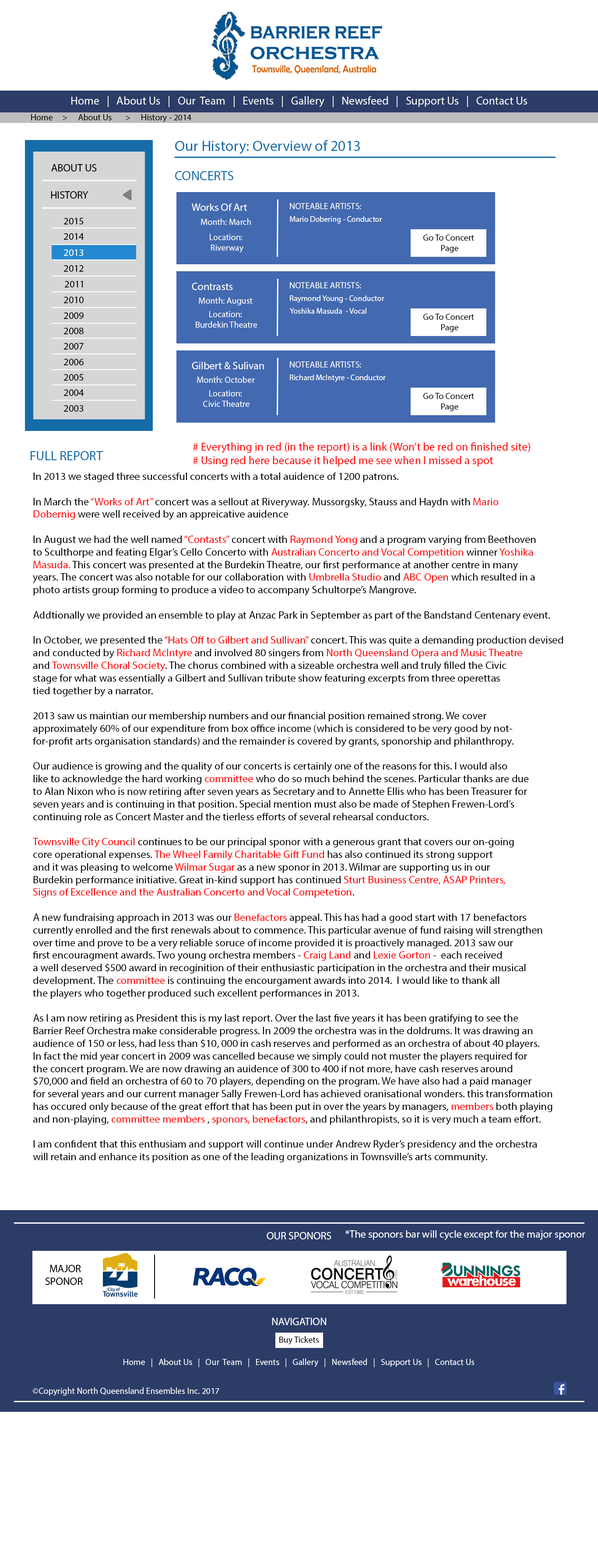
<style>
.page{position:relative;width:598px;height:1568px;background:#ffffff}
.page>*{position:absolute;margin:0}
.t1{font:8.8px "MyriadPro-Regular";color:#000000}
.t2{font:14.9px "MyriadPro-Regular";color:#156ca9}
.t3{font:10.5px "MyriadPro-Regular";color:#000000}
.t4{font:13.1px "MyriadPro-Regular";color:#156ca9}
.t5{font:10.5px "MyriadPro-Regular";color:#ffffff}
.t6{font:8.8px "MyriadPro-Regular";color:#ffffff}
.t7{font:9.6px "MyriadPro-Regular";color:#000000;scale:1.03 1}
.t8{font:7.9px "MyriadPro-Regular";color:#ffffff}
.t9{font:9.6px "MyriadPro-Regular";color:#ffffff;scale:1.03 1}
.t10{font:11.4px "MyriadPro-Regular";color:#ff0000}
.t11{font:10.5px "MyriadPro-Regular";color:#ff0000}
.t12{font:10.5px "MyriadPro-Regular";color:#fe0000}
</style>
<div class="page">
<p class="t1" style="left:31px;top:114px;width:160px;height:8px">Home &gt; About Us &gt; History - 2014</p>
<p class="t2" style="left:175px;top:140px;width:185px;height:14px">Our History: Overview of 2013</p>
<p class="t3" style="left:51px;top:164px;width:46px;height:8px">ABOUT US</p>
<p class="t4" style="left:175px;top:171px;width:58px;height:9px">CONCERTS</p>
<p class="t3" style="left:51px;top:191px;width:37px;height:8px">HISTORY</p>
<p class="t5" style="left:192px;top:203px;width:55px;height:8px">Works Of Art</p>
<p class="t6" style="left:290px;top:203px;width:71px;height:6px">NOTEABLE ARTISTS:</p>
<p class="t7" style="left:63px;top:218px;width:21px;height:6px">2015</p>
<p class="t6" style="left:201px;top:218px;width:50px;height:7px">Month: March</p>
<p class="t8" style="left:290px;top:216px;width:92px;height:8px">Mario Dobering - Conductor</p>
<p class="t7" style="left:63px;top:233px;width:21px;height:7px">2014</p>
<p class="t6" style="left:210px;top:234px;width:33px;height:18px;text-align:center">Location: <br>Riverway</p>
<p class="t1" style="left:423px;top:234px;width:51px;height:19px;text-align:center">Go To Concert <br>Page</p>
<p class="t9" style="left:63px;top:249px;width:21px;height:7px">2013</p>
<p class="t7" style="left:63px;top:265px;width:21px;height:7px">2012</p>
<p class="t7" style="left:64px;top:281px;width:19px;height:6px">2011</p>
<p class="t5" style="left:192px;top:283px;width:41px;height:7px">Contrasts</p>
<p class="t6" style="left:290px;top:282px;width:71px;height:6px">NOTEABLE ARTISTS:</p>
<p class="t7" style="left:63px;top:297px;width:21px;height:6px">2010</p>
<p class="t6" style="left:199px;top:297px;width:53px;height:8px">Month: August</p>
<p class="t8" style="left:290px;top:295px;width:94px;height:8px">Raymond Young - Conductor</p>
<p class="t7" style="left:63px;top:312px;width:21px;height:7px">2009</p>
<p class="t6" style="left:196px;top:311px;width:61px;height:17px;text-align:center">Location: <br>Burdekin Theatre</p>
<p class="t8" style="left:290px;top:308px;width:76px;height:6px">Yoshika Masuda  - Vocal</p>
<p class="t1" style="left:423px;top:314px;width:51px;height:18px;text-align:center">Go To Concert <br>Page</p>
<p class="t7" style="left:63px;top:328px;width:21px;height:6px">2008</p>
<p class="t7" style="left:63px;top:343px;width:21px;height:7px">2007</p>
<p class="t7" style="left:63px;top:359px;width:21px;height:6px">2006</p>
<p class="t5" style="left:192px;top:362px;width:72px;height:7px">Gilbert &amp; Sulivan</p>
<p class="t6" style="left:290px;top:361px;width:71px;height:7px">NOTEABLE ARTISTS:</p>
<p class="t7" style="left:63px;top:374px;width:21px;height:7px">2005</p>
<p class="t6" style="left:197px;top:376px;width:58px;height:7px">Month: October</p>
<p class="t8" style="left:290px;top:374px;width:95px;height:8px">Richard McIntyre - Conductor</p>
<p class="t7" style="left:63px;top:389px;width:21px;height:7px">2004</p>
<p class="t6" style="left:203px;top:390px;width:46px;height:17px;text-align:center">Location: <br>Civic Theatre</p>
<p class="t1" style="left:423px;top:393px;width:51px;height:18px;text-align:center">Go To Concert <br>Page</p>
<p class="t7" style="left:63px;top:405px;width:21px;height:7px">2003</p>
<p class="t10" style="left:193px;top:442px;width:337px;height:24px"># Everything in red (in the report) is a link (Won’t be red on finished site)<br># Using red here because it helped me see when I missed a spot</p>
<p class="t4" style="left:31px;top:451px;width:72px;height:9px">FULL REPORT</p>
<p class="t3" style="left:33px;top:472px;width:530px;height:690px">In 2013 we staged three successful concerts with a total auidence of 1200 patrons. <br><br>In March the <span class="t11">“Works of Art” </span>concert was a sellout at Riveryway. Mussorgsky, Stauss and Haydn with <span class="t11">Mario <br>Dobernig </span>were well received by an appreicative auidence<br><br>In August we had the well named <span class="t11">“Contasts”</span> concert with <span class="t11">Raymond Yong</span> and a program varying from Beethoven<br>to Sculthorpe and feating Elgar’s Cello Concerto with <span class="t11">Australian Concerto and Vocal Competition</span> winner <span class="t11">Yoshika <br>Masuda.</span> This concert was presented at the Burdekin Theatre, our first performance at another centre in many <br>years. The concert was also notable for our collaboration with <span class="t11">Umbrella Studio</span> and <span class="t12">ABC Open</span> which resulted in a <br>photo artists group forming to produce a video to accompany Schultorpe’s Mangrove.<br><br>Addtionally we provided an ensemble to play at Anzac Park in September as part of the Bandstand Centenary event.<br><br>In October, we presented the <span class="t11">“Hats Off to Gilbert and Sullivan”</span> concert. This was quite a demanding production devised <br>and conducted by <span class="t11">Richard McIntyre</span> and involved 80 singers from <span class="t11">North Queensland Opera and Music Theatre</span> <br>and <span class="t11">Townsville Choral Society</span>. The chorus combined with a sizeable orchestra well and truly filled the Civic <br>stage for what was essentially a Gilbert and Sullivan tribute show featuring excerpts from three operettas <br>tied together by a narrator.<br><br>2013 saw us maintian our membership numbers and our financial position remained strong. We cover<br>approximately 60% of our expenditure from box office income (which is considered to be very good by not-<br>for-profit arts organisation standards) and the remainder is covered by grants, sponorship and philanthropy.<br><br>Our audience is growing and the quality of our concerts is certainly one of the reasons for this. I would also<br>like to acknowledge the hard working <span class="t11">committee </span>who do so much behind the scenes. Particular thanks are due<br>to Alan Nixon who is now retiring after seven years as Secretary and to Annette Ellis who has been Treasurer for<br>seven years and is continuing in that position. Special mention must also be made of Stephen Frewen-Lord’s<br>continuing role as Concert Master and the tierless efforts of several rehearsal conductors.<br><br><span class="t11">Townsville City Council</span> continues to be our principal sponor with a generous grant that covers our on-going<br>core operational expenses. <span class="t11">The Wheel Family Charitable Gift Fund</span> has also continued its strong support<br>and it was pleasing to welcome <span class="t11">Wilmar Sugar</span> as a new sponor in 2013. Wilmar are supporting us in our<br>Burdekin performance initiative. Great in-kind support has continued <span class="t11">Sturt Business Centre, ASAP Printers,<br>Signs of Excellence and the Australian Concerto and Vocal Competetion</span>.<br><br>A new fundraising approach in 2013 was our <span class="t11">Benefactors</span> appeal. This has had a good start with 17 benefactors <br>currently enrolled and the first renewals about to commence. This particular avenue of fund raising will strengthen<br>over time and prove to be a very reliable soruce of income provided it is proactively managed. 2013 saw our<br>first encouragment awards. Two young orchestra members - <span class="t11">Craig Land</span> and <span class="t12">Lexie Gorton</span> -  each received<br>a well deserved $500 award in recoginition of their enthusiastic participation in the orchestra and their musical<br>development. The <span class="t11">committee</span> is continuing the encourgament awards into 2014.  I would like to thank all<br>the players who together produced such excellent performances in 2013.<br><br>As I am now retiring as President this is my last report. Over the last five years it has been gratifying to see the<br>Barrier Reef Orchestra make considerable progress. In 2009 the orchestra was in the doldrums. It was drawing an<br>audience of 150 or less, had less than $10, 000 in cash reserves and performed as an orchestra of about 40 players.<br>In fact the mid year concert in 2009 was cancelled because we simply could not muster the players required for<br>the concert program. We are now drawing an auidence of 300 to 400 if not more, have cash reserves around<br>$70,000 and field an orchestra of 60 to 70 players, depending on the program. We have also had a paid manager<br>for several years and our current manager Sally Frewen-Lord has achieved oranisational wonders. this transformation<br>has occured only because of the great effort that has been put in over the years by managers, <span class="t12">members</span> both playing<br>and non-playing, <span class="t11">committee members</span> , <span class="t11">sponors, benefactors</span>, and philanthropists, so it is very much a team effort.<br><br>I am confident that this enthusiam and support will continue under Andrew Ryder’s presidency and the orchestra<br>will retain and enhance its position as one of the leading organizations in Townsville’s arts community.</p>
</div>
